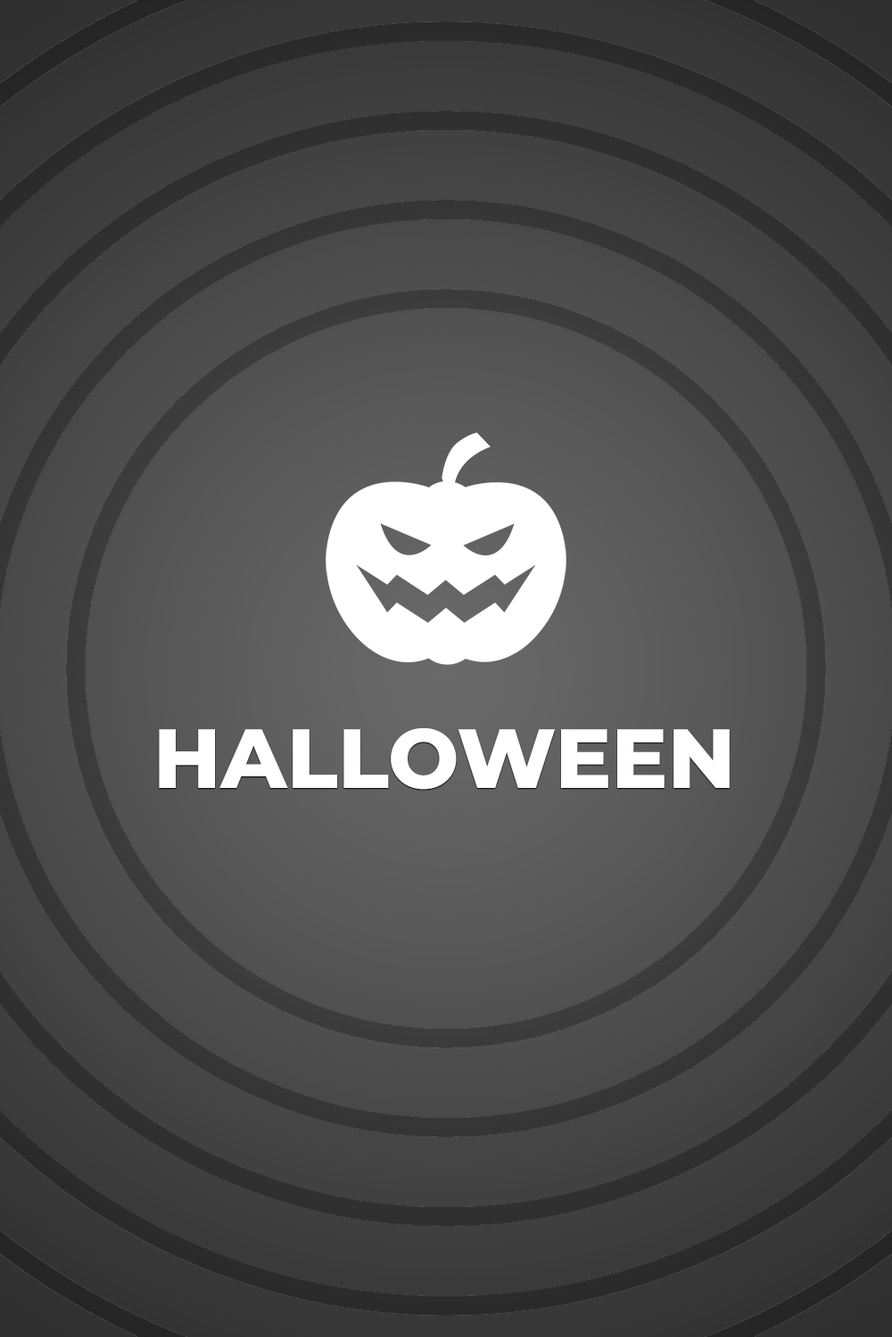
<style>
.page{position:relative;width:892px;height:1337px}
.page>*{position:absolute;margin:0}
.t1{font:83.8px "MontserratRoman-ExtraBold";color:#ffffff}
</style>
<div class="page">
<p class="t1" style="left:159px;top:728px;width:570px;height:62px">HALLOWEEN</p>
</div>
